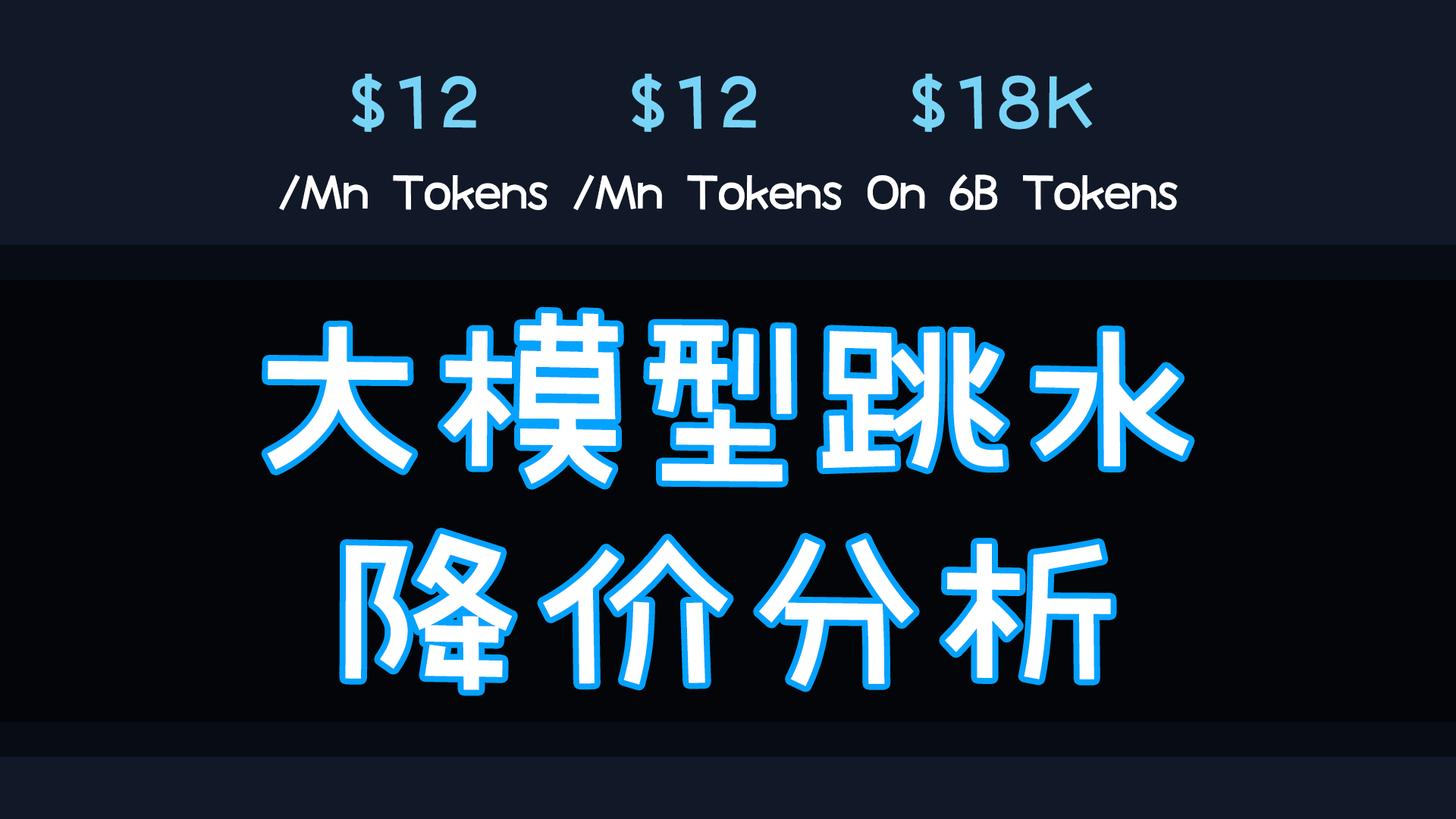
<style>
.page{position:relative;width:1456px;height:819px;background:#030508}
.page>*{position:absolute;margin:0}
.t1{font:91px "GEETYPE-SkyGB-Flash-Medium";color:#78d4f6}
.t2{font:60.7px "GEETYPE-SkyGB-Flash-Medium";letter-spacing:-0.1em;color:#ffffff}
.t3{font:197.2px/212.3px "GEETYPE-SkyGB-Flash-Medium";color:#ffffff}
</style>
<div class="page">
<p class="t1" style="left:352px;top:74px;width:124px;height:58px">$12</p>
<p class="t1" style="left:632px;top:74px;width:124px;height:58px">$12</p>
<p class="t1" style="left:912px;top:74px;width:181px;height:58px">$18K</p>
<p class="t2" style="left:279px;top:174px;width:269px;height:37px">/Mn Tokens</p>
<p class="t2" style="left:573px;top:174px;width:269px;height:37px">/Mn Tokens</p>
<p class="t2" style="left:868px;top:174px;width:310px;height:37px">On 6B Tokens</p>
<p class="t3" style="left:267px;top:312px;width:922px;height:378px;text-align:center">大模型跳水<br>降价分析</p>
</div>
